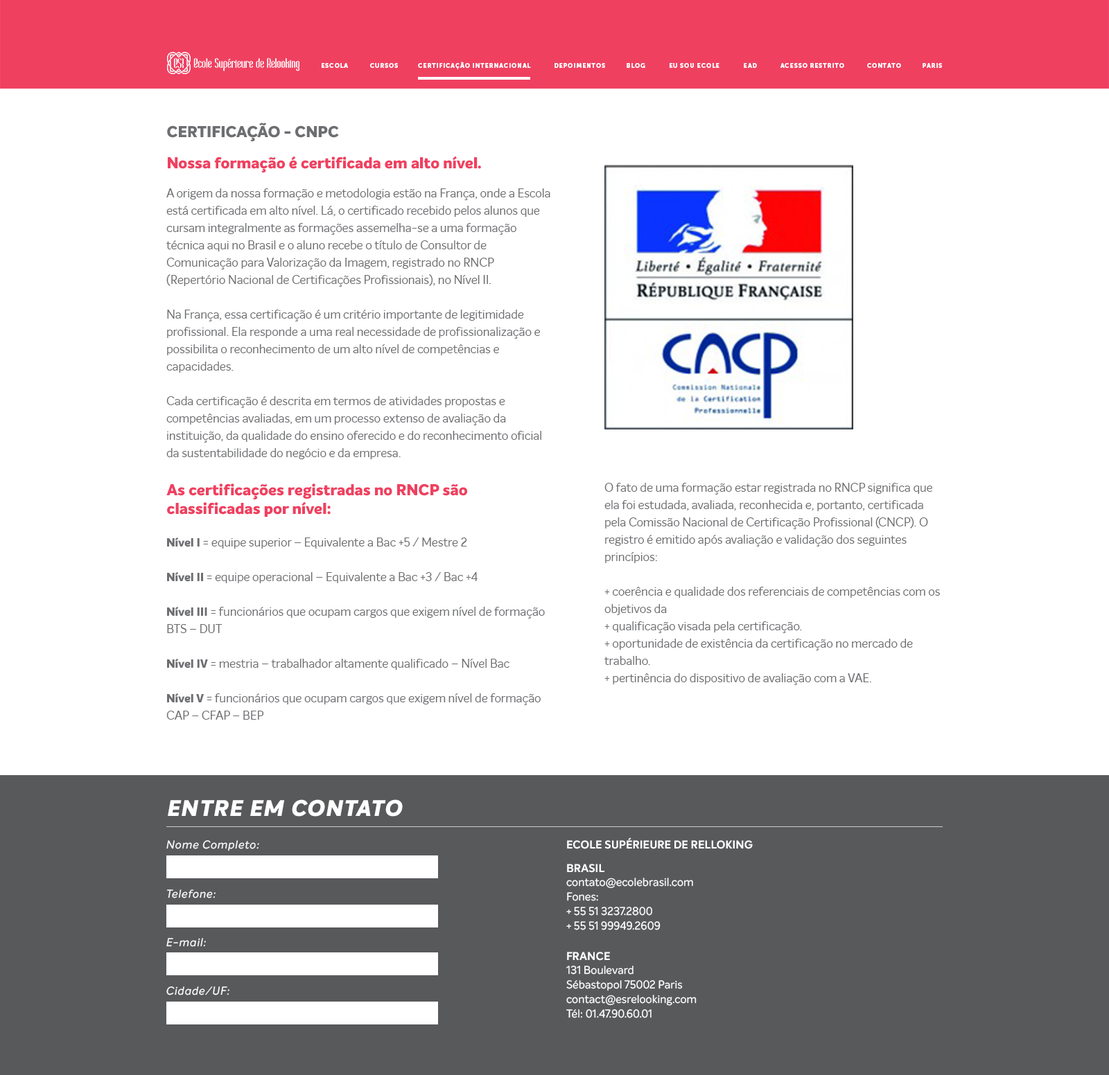
<style>
.page{position:relative;width:1109px;height:1075px;background:#ffffff}
.page>*{position:absolute;margin:0}
.t1{font:6.2px "MuseoSans-900";letter-spacing:0.1em;color:#ffffff;text-transform:uppercase}
.t2{font:15.4px "InteloAlt-ExtraBold";color:#6d6e71;text-transform:uppercase}
.t3{font:15.4px "InteloAlt-ExtraBold";color:#ef4060}
.t4{font:11.5px/17.3px "InteloAlt-Regular";color:#6d6e71}
.t5{font:15.4px/18.8px "InteloAlt-ExtraBold";color:#ef4060}
.t6{font:11.5px/17.3px "InteloAlt-ExtraBold";color:#6d6e71}
.t7{font:22.2px "InteloAlt-ExtraBoldItalic";letter-spacing:0.05em;color:#ffffff;text-transform:uppercase}
.t8{font:11.2px "InteloAlt-Italic";letter-spacing:0.05em;color:#ffffff}
.t9{font:11.2px "InteloAlt-Bold";color:#ffffff;text-transform:uppercase}
.t10{font:11.2px/14.4px "Intelo-Regular";color:#ffffff}
</style>
<div class="page">
<p class="t1" style="left:322px;top:63px;width:26px;height:5px">escola</p>
<p class="t1" style="left:370px;top:63px;width:28px;height:5px">cursos</p>
<p class="t1" style="left:418px;top:62px;width:113px;height:7px">CERTIFICAÇÃO internacional</p>
<p class="t1" style="left:554px;top:63px;width:51px;height:5px">depoimentos</p>
<p class="t1" style="left:626px;top:63px;width:19px;height:5px">blog</p>
<p class="t1" style="left:669px;top:63px;width:50px;height:5px">eu sou ecole</p>
<p class="t1" style="left:744px;top:63px;width:13px;height:5px">ead</p>
<p class="t1" style="left:780px;top:63px;width:64px;height:5px">ACESSO RESTRITO</p>
<p class="t1" style="left:867px;top:63px;width:34px;height:5px">contato</p>
<p class="t1" style="left:922px;top:63px;width:20px;height:5px">paris</p>
<p class="t2" style="left:167px;top:123px;width:172px;height:18px">CERTIFICAÇÃO - CNPC</p>
<p class="t3" style="left:168px;top:156px;width:313px;height:17px">Nossa formação é certificada em alto nível.</p>
<p class="t4" style="left:166px;top:188px;width:384px;height:271px">A origem da nossa formação e metodologia estão na França, onde a Escola está certificada em alto nível. Lá, o certificado recebido pelos alunos que cursam integralmente as formações assemelha-se a uma formação técnica aqui no Brasil e o aluno recebe o título de Consultor de Comunicação para Valorização da Imagem, registrado no RNCP (Repertório Nacional de Certificações Profissionais), no Nível II.<br><br>Na França, essa certificação é um critério importante de legitimidade profissional. Ela responde a uma real necessidade de profissionalização e possibilita o reconhecimento de um alto nível de competências e capacidades.<br><br>Cada certificação é descrita em termos de atividades propostas e competências avaliadas, em um processo extenso de avaliação da instituição, da qualidade do ensino oferecido e do reconhecimento oficial da sustentabilidade do negócio e da empresa.</p>
<p class="t5" style="left:166px;top:484px;width:301px;height:34px">As certificações registradas no RNCP são <br>classificadas por nível:</p>
<p class="t4" style="left:604px;top:483px;width:336px;height:202px">O fato de uma formação estar registrada no RNCP significa que ela foi estudada, avaliada, reconhecida e, portanto, certificada pela Comissão Nacional de Certificação Profissional (CNCP). O registro é emitido após avaliação e validação dos seguintes princípios:<br><br>+ coerência e qualidade dos referenciais de competências com os objetivos da <br>+ qualificação visada pela certificação.<br>+ oportunidade de existência da certificação no mercado de trabalho.<br>+ pertinência do dispositivo de avaliação com a VAE.</p>
<p class="t4" style="left:166px;top:537px;width:379px;height:183px"><span class="t6">Nível I </span>= equipe superior – Equivalente a Bac +5 / Mestre 2<br><br><span class="t6">Nível II</span> = equipe operacional – Equivalente a Bac +3 / Bac +4<br><br><span class="t6">Nível III </span>= funcionários que ocupam cargos que exigem nível de formação BTS – DUT<br><br><span class="t6">Nível IV</span> = mestria – trabalhador altamente qualificado – Nível Bac<br><br><span class="t6">Nível V </span>= funcionários que ocupam cargos que exigem nível de formação CAP – CFAP – BEP</p>
<p class="t7" style="left:168px;top:800px;width:235px;height:17px">entre em contato</p>
<p class="t8" style="left:166px;top:841px;width:93px;height:11px">Nome Completo:</p>
<p class="t9" style="left:567px;top:838px;width:186px;height:12px">Ecole Supérieure de Relloking</p>
<p class="t9" style="left:567px;top:864px;width:37px;height:9px">BRASIL</p>
<p class="t10" style="left:566px;top:878px;width:127px;height:53px">contato@ecolebrasil.com<br>Fones: <br>+ 55 51 3237.2800 <br>+ 55 51 99949.2609</p>
<p class="t8" style="left:167px;top:890px;width:49px;height:9px">Telefone:</p>
<p class="t8" style="left:166px;top:938px;width:40px;height:9px">E-mail:</p>
<p class="t9" style="left:567px;top:952px;width:43px;height:9px">france</p>
<p class="t10" style="left:566px;top:966px;width:130px;height:53px">131 Boulevard <br>Sébastopol 75002 Paris<br>contact@esrelooking.com<br>Tél: 01.47.90.60.01</p>
<p class="t8" style="left:166px;top:987px;width:63px;height:9px">Cidade/UF:</p>
</div>
